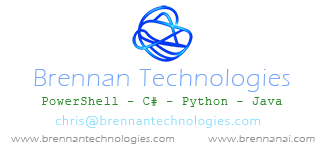
<style>
.page{position:relative;width:325px;height:150px;background:#ffffff}
.page>*{position:absolute;margin:0}
.t1{font:25px "ErasITC-Light";letter-spacing:0.05em;color:#78a8f9}
.t2{font:12px "CourierNewPSMT";letter-spacing:0.05em;color:#2f8c2f}
.t3{font:14px "CorbelLight";letter-spacing:0.05em;color:#7ddbfe}
.t4{font:11px "ErasITC-Light";letter-spacing:0.05em;color:#969696}
</style>
<div class="page">
<p class="t1" style="left:34px;top:69px;width:256px;height:23px">Brennan Technologies</p>
<p class="t2" style="left:42px;top:97px;width:240px;height:10px">PowerShell - C# - Python - Java</p>
<p class="t3" style="left:55px;top:115px;width:205px;height:13px">chris@brennantechnologies.com</p>
<p class="t4" style="left:11px;top:135px;width:163px;height:9px">www.brennantechnologies.com</p>
<p class="t4" style="left:208px;top:135px;width:107px;height:7px">www.brennanai.com</p>
</div>
